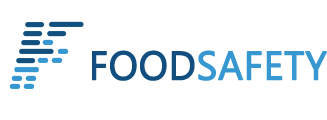
<style>
.page{position:relative;width:327px;height:120px;background:#ffffff}
.page>*{position:absolute;margin:0}
.t1{font:40px "Ebrima";color:#3697d1;font-weight:bold;scale:0.96 1}
.t2{font:40px "Ebrima";color:#124f80;font-weight:bold;scale:0.96 1}
</style>
<div class="page">
<p class="t1" style="left:92px;top:50px;width:235px;height:31px"><span class="t2">FOOD</span>SAFETY</p>
</div>
